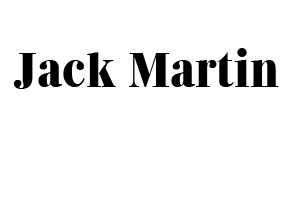
<style>
.page{position:relative;width:300px;height:199px;background:#ffffff}
.page>*{position:absolute;margin:0}
.t1{font:48px "QuantasExtrabold";color:#000000}
</style>
<div class="page">
<p class="t1" style="left:14px;top:48px;width:265px;height:41px">Jack Martin</p>
</div>
